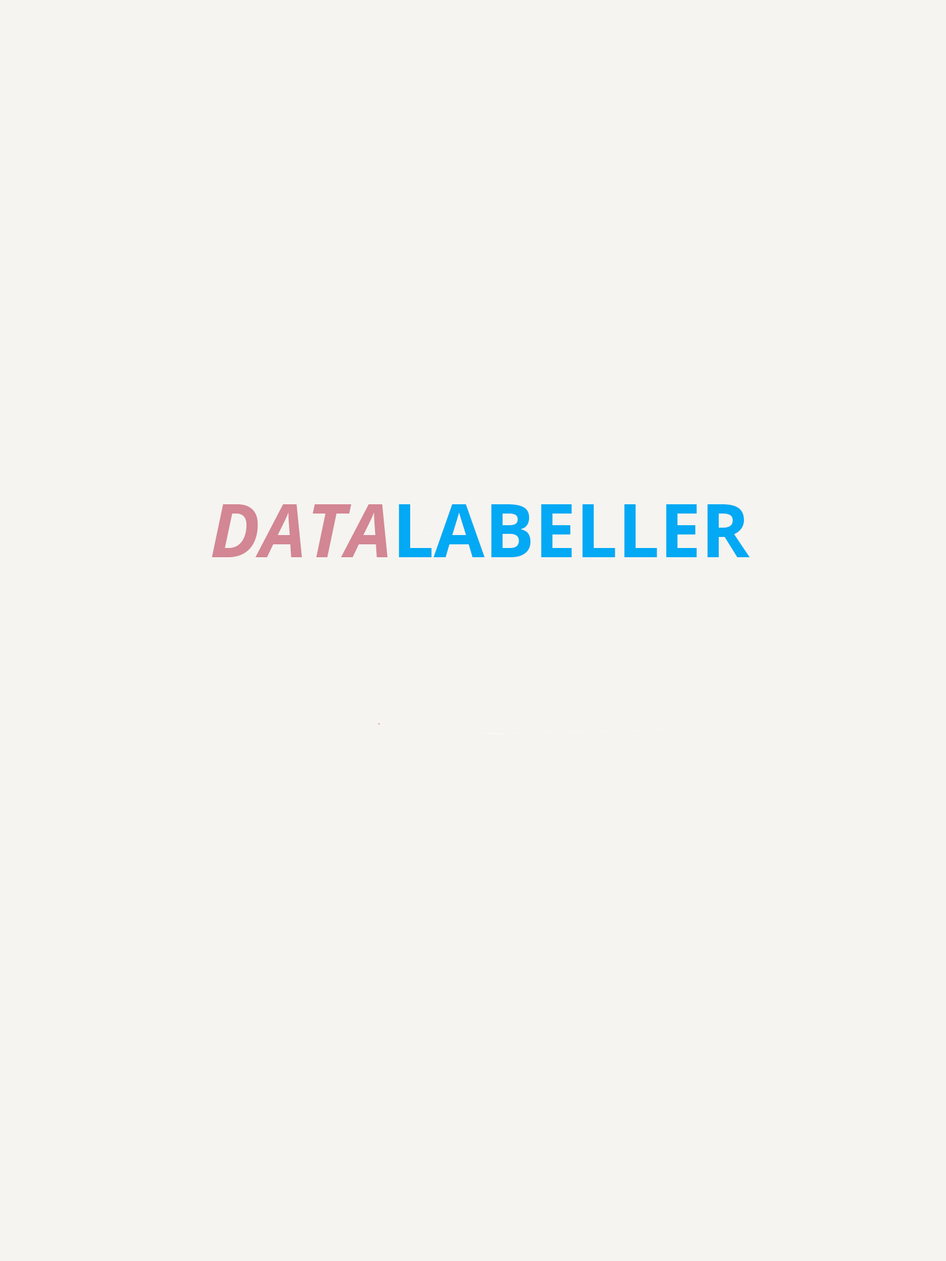
<style>
.page{position:relative;width:946px;height:1261px;background:#f5f4f0}
.page>*{position:absolute;margin:0}
.t1{font:73.9px "OpenSans-Bold";color:#03a9f4}
.t2{font:73.9px "OpenSans-BoldItalic";color:#d38693}
</style>
<div class="page">
<p class="t1" style="left:212px;top:504px;width:538px;height:53px"><span class="t2">DATA</span>LABELLER</p>
</div>
